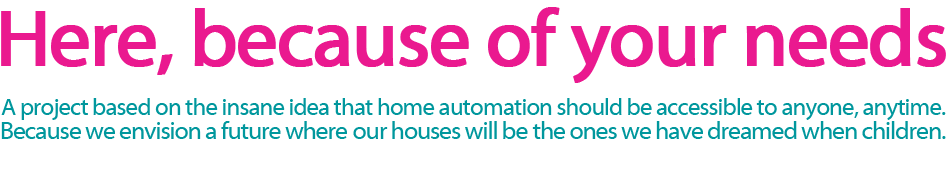
<style>
.page{position:relative;width:946px;height:170px;background:#ffffff}
.page>*{position:absolute;margin:0}
.t1{font:80.5px "MyriadWebPro";letter-spacing:-0.04em;color:#ea198f;font-weight:bold}
.t2{font:24.3px "MyriadWebPro";letter-spacing:-0.04em;color:#00979d}
.t3{font:24.7px "MyriadWebPro";letter-spacing:-0.04em;color:#00979d}
</style>
<div class="page">
<p class="t1" style="left:1px;top:7px;width:945px;height:76px">Here, because of your needs</p>
<p class="t2" style="left:1px;top:98px;width:945px;height:22px">A project based on the insane idea that home automation should be accessible to anyone, anytime.</p>
<p class="t3" style="left:1px;top:121px;width:945px;height:18px">Because we envision a future where our houses will be the ones we have dreamed when children.</p>
</div>
